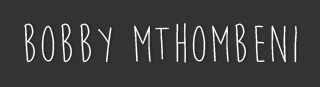
<style>
.page{position:relative;width:320px;height:87px;background:#333333}
.page>*{position:absolute;margin:0}
.t1{font:53.8px "MoonFlower";color:#ffffff;scale:1.17 1}
</style>
<div class="page">
<p class="t1" style="left:24px;top:23px;width:273px;height:40px">bobby mthombeni</p>
</div>
